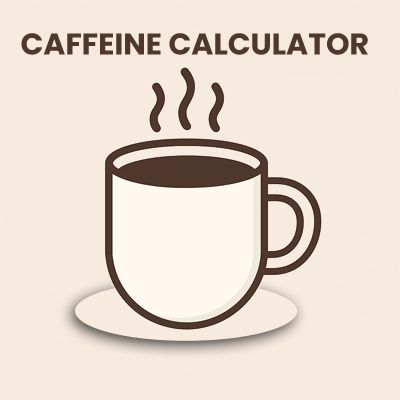
<style>
.page{position:relative;width:400px;height:400px;background:#f7eadf}
.page>*{position:absolute;margin:0}
.t1{font:30px "Poppins-Bold";color:#4f372c}
</style>
<div class="page">
<p class="t1" style="left:21px;top:33px;width:347px;height:22px">CAFFEINE CALCULATOR</p>
</div>
